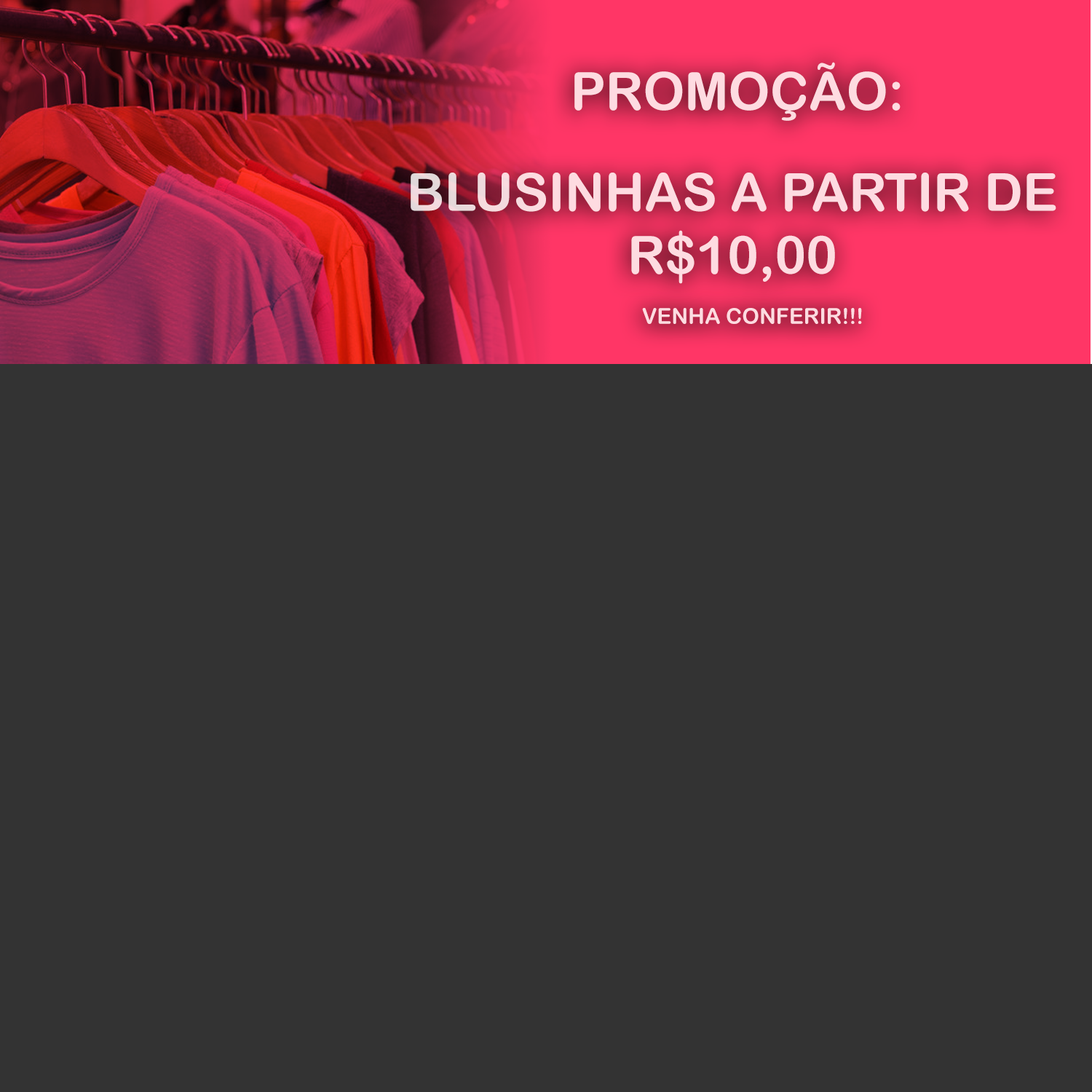
<style>
.page{position:relative;width:1092px;height:1092px;background:#333333}
.page>*{position:absolute;margin:0}
.t1{font:52.4px "ArialRoundedMTBold";color:#fedbe1}
.t2{font:21.8px "ArialRoundedMTBold";color:#fedbe1}
</style>
<div class="page">
<p class="t1" style="left:574px;top:62px;width:327px;height:59px">PROMOÇÃO:</p>
<p class="t1" style="left:411px;top:173px;width:645px;height:111px;text-align:center">BLUSINHAS A PARTIR DE<br>R$10,00</p>
<p class="t2" style="left:642px;top:308px;width:220px;height:16px">VENHA CONFERIR!!!</p>
</div>
